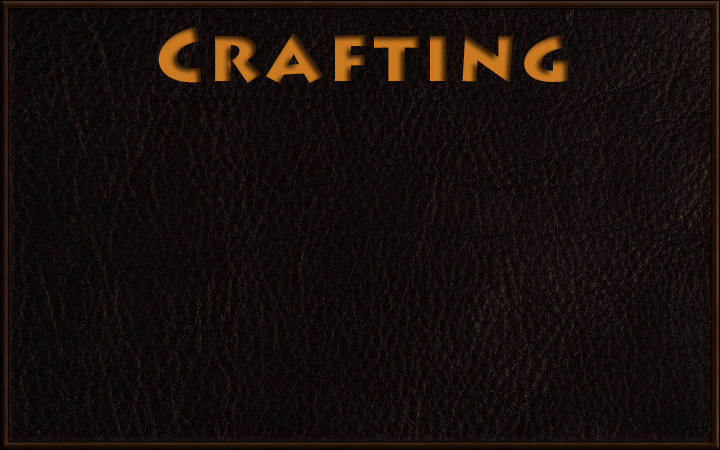
<style>
.page{position:relative;width:720px;height:450px}
.page>*{position:absolute;margin:0}
.t1{font:75px "LithosPro-Black";letter-spacing:0.06em}
</style>
<div class="page">
<p class="t1" style="left:158px;top:26px;width:411px;height:58px">Crafting</p>
</div>
